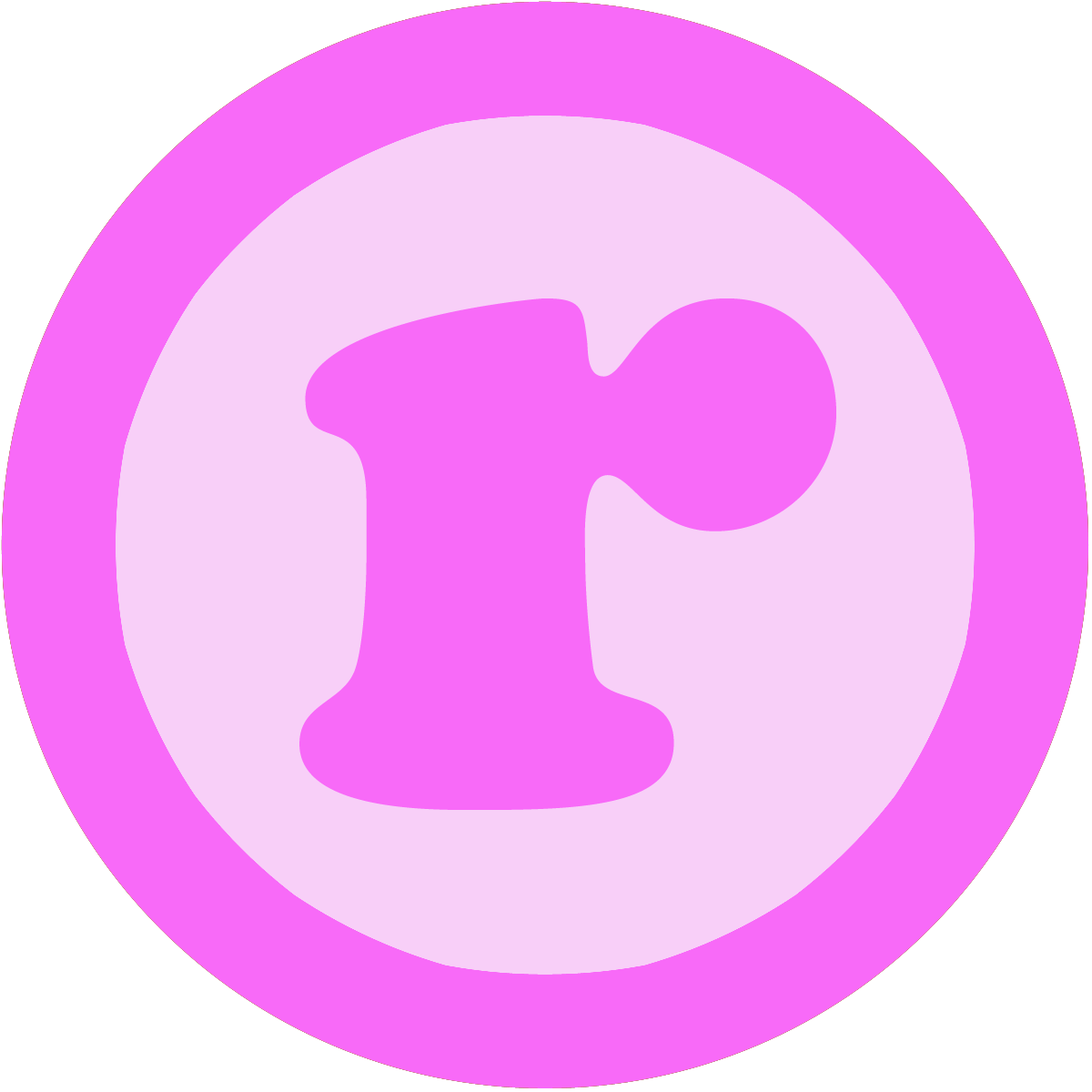
<style>
.page{position:relative;width:1092px;height:1092px;background:#f86af8}
.page>*{position:absolute;margin:0}
.t1{font:984.7px "CooperBlackStd";color:#f86af8}
</style>
<div class="page">
<p class="t1" style="left:299px;top:298px;width:537px;height:512px">r</p>
</div>
